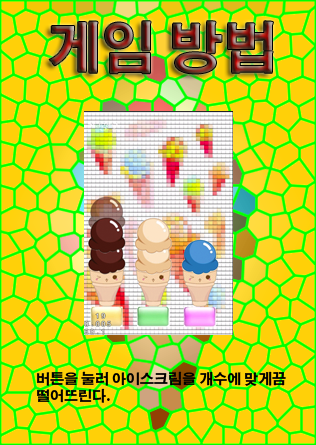
<style>
.page{position:relative;width:316px;height:445px;background:#ffd008}
.page>*{position:absolute;margin:0}
.t1{font:55px "AdobeGothicStd-Bold"}
.t2{font:14px "AdobeGothicStd-Bold";color:#000000}
</style>
<div class="page">
<p class="t1" style="left:49px;top:21px;width:224px;height:53px">게임 방법</p>
<p class="t2" style="left:37px;top:371px;width:249px;height:32px">버튼을 눌러 아이스크림을 개수에 맞게끔 <br>떨어뜨린다.</p>
</div>
